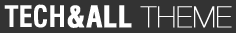
<style>
.page{position:relative;width:236px;height:33px;background:#333333}
.page>*{position:absolute;margin:0}
.t1{font:29px "AovelSans-Light";color:#ffffff;font-weight:bold}
.t2{font:29px "MilfordCondensedBold";color:#ffffff}
.t3{font:29px "MilfordCondensedBold";color:#ffffff;font-weight:bold}
</style>
<div class="page">
<p class="t1" style="left:4px;top:4px;width:228px;height:24px"><span class="t2">TECH</span><span class="t3">&amp;ALL </span>THEME</p>
</div>
